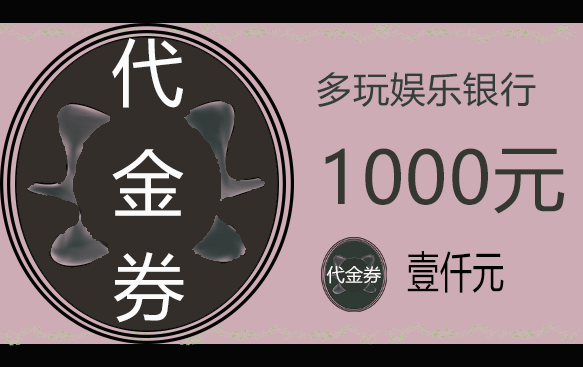
<style>
.page{position:relative;width:583px;height:367px;background:#cdacb5}
.page>*{position:absolute;margin:0}
.t1{font:72px "MicrosoftYaHei";letter-spacing:0.02em;color:#fbfbfb}
.t2{font:36px "MicrosoftYaHei";letter-spacing:0.02em;color:#333d3c}
.t3{font:72px "MicrosoftYaHei";letter-spacing:0.02em;color:#353831}
.t4{font:43.1px "MicrosoftYaHei";letter-spacing:0.02em;color:#020202;scale:0.74 1}
.t5{font:18px "MicrosoftYaHei";letter-spacing:0.02em;color:#fcfafa}
</style>
<div class="page">
<p class="t1" style="left:112px;top:38px;width:71px;height:70px">代</p>
<p class="t2" style="left:317px;top:72px;width:219px;height:35px">多玩娱乐银行</p>
<p class="t1" style="left:112px;top:149px;width:72px;height:67px">金</p>
<p class="t3" style="left:325px;top:148px;width:240px;height:66px">1000元</p>
<p class="t1" style="left:114px;top:252px;width:70px;height:71px">券</p>
<p class="t4" style="left:407px;top:251px;width:97px;height:42px">壹仟元</p>
<p class="t5" style="left:326px;top:266px;width:55px;height:18px">代金券</p>
</div>
